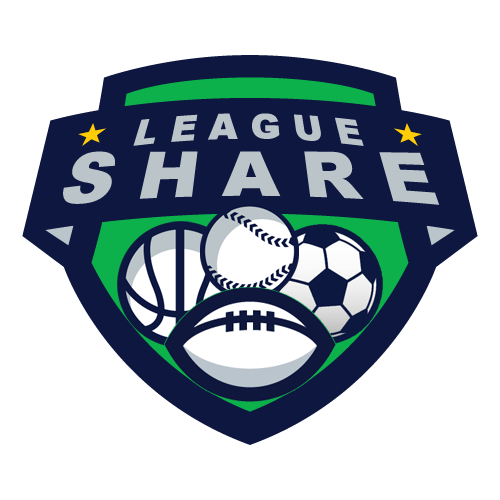
<style>
.page{position:relative;width:500px;height:500px;background:#ffffff}
.page>*{position:absolute;margin:0}
.t1{font:36px "Arial-Black";color:#bac4c9}
.t2{font:72px "Arial-Black";color:#bac4c9}
</style>
<div class="page">
<p class="t1" style="left:133px;top:113px;width:231px;height:33px">L E A G U E</p>
<p class="t2" style="left:63px;top:151px;width:377px;height:54px">S H A R E</p>
</div>
